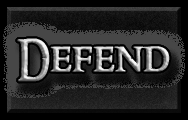
<style>
.page{position:relative;width:188px;height:120px;background:#000000}
.page>*{position:absolute;margin:0}
.t1{font:40px "RingbearerMedium";letter-spacing:0.01em;font-weight:bold}
</style>
<div class="page">
<p class="t1" style="left:17px;top:38px;width:153px;height:44px">Defend</p>
</div>
